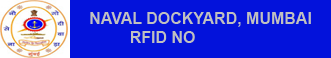
<style>
.page{position:relative;width:331px;height:58px;background:#0312db}
.page>*{position:absolute;margin:0}
.t1{font:16px "Arial-BoldMT";color:#c0c0c0}
.t2{font:16px "ArialMT";color:#c0c0c0}
</style>
<div class="page">
<p class="t1" style="left:90px;top:12px;width:221px;height:15px"><span class="t2">                                           </span>NAVAL DOCKYARD, MUMBAI</p>
<p class="t1" style="left:131px;top:31px;width:64px;height:12px">RFID NO</p>
</div>
